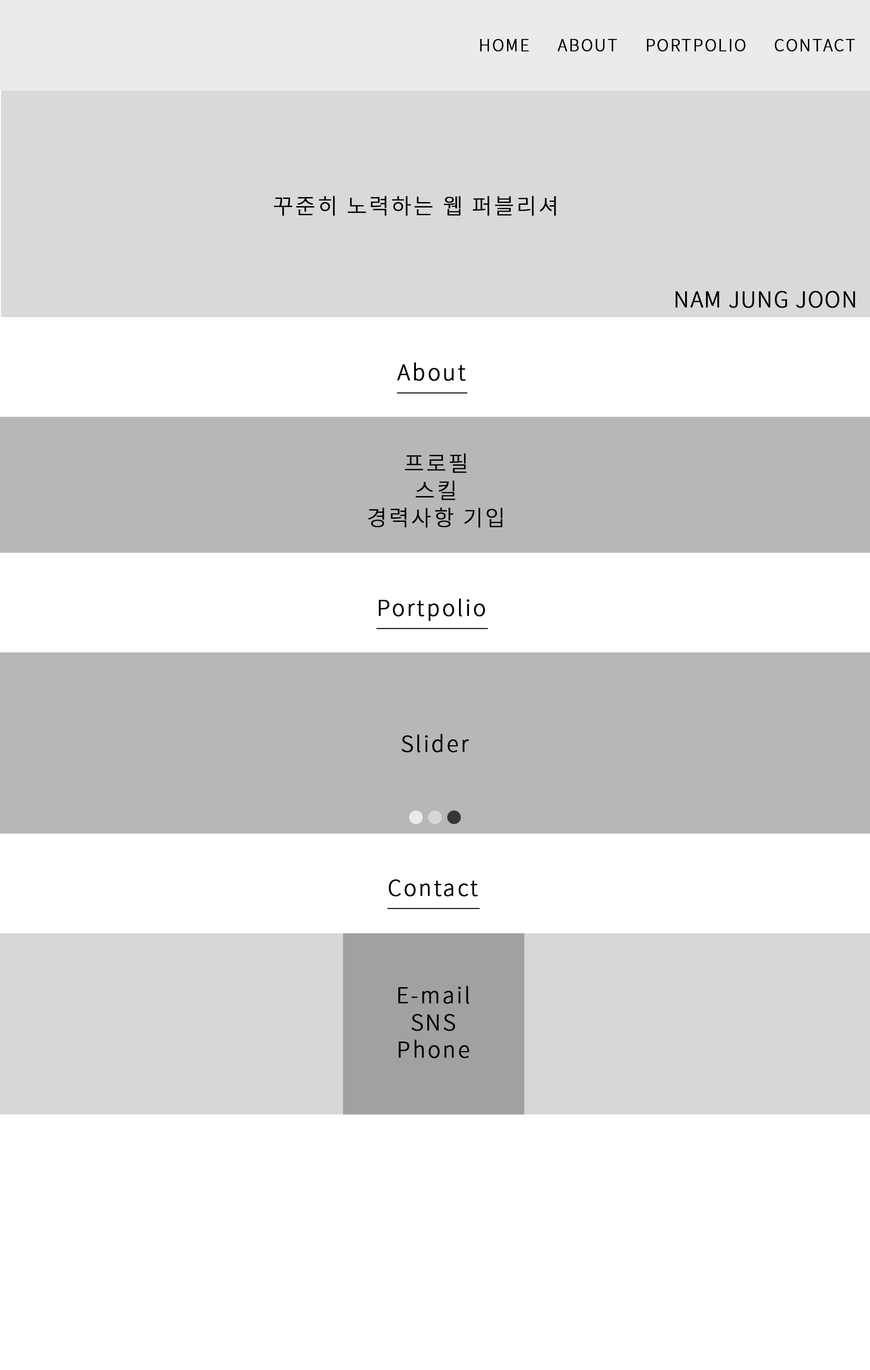
<style>
.page{position:relative;width:870px;height:1370px;background:#ffffff}
.page>*{position:absolute;margin:0}
.t1{font:16.3px "NotoSansKR-Light";letter-spacing:0.075em;color:#000000;font-weight:bold}
.t2{font:21.8px "NotoSansKR-Light";letter-spacing:0.075em;color:#000000;font-weight:bold}
.t3{font:21.8px "NotoSansKR-Light";letter-spacing:0.025em;color:#000000;font-weight:bold}
.t4{font:21.8px "NotoSansKR-Light";letter-spacing:0.075em;color:#000000;font-weight:bold;text-decoration:underline}
.t5{font:21.8px/27.2px "NotoSansKR-Light";letter-spacing:0.075em;color:#000000;font-weight:bold}
</style>
<div class="page">
<p class="t1" style="left:480px;top:39px;width:375px;height:13px">HOME     ABOUT     PORTPOLIO     CONTACT</p>
<p class="t2" style="left:274px;top:196px;width:282px;height:20px">꾸준히 노력하는 웹 퍼블리셔</p>
<p class="t3" style="left:676px;top:291px;width:179px;height:17px">NAM JUNG JOON</p>
<p class="t4" style="left:397px;top:363px;width:71px;height:31px">About</p>
<p class="t5" style="left:368px;top:453px;width:135px;height:75px;text-align:center">프로필<br>스킬<br>경력사항 기입</p>
<p class="t4" style="left:376px;top:599px;width:112px;height:30px">Portpolio</p>
<p class="t2" style="left:402px;top:734px;width:67px;height:19px">Slider</p>
<p class="t4" style="left:387px;top:880px;width:93px;height:30px">Contact</p>
<p class="t5" style="left:398px;top:986px;width:71px;height:73px;text-align:center">E-mail<br>SNS<br>Phone</p>
</div>
